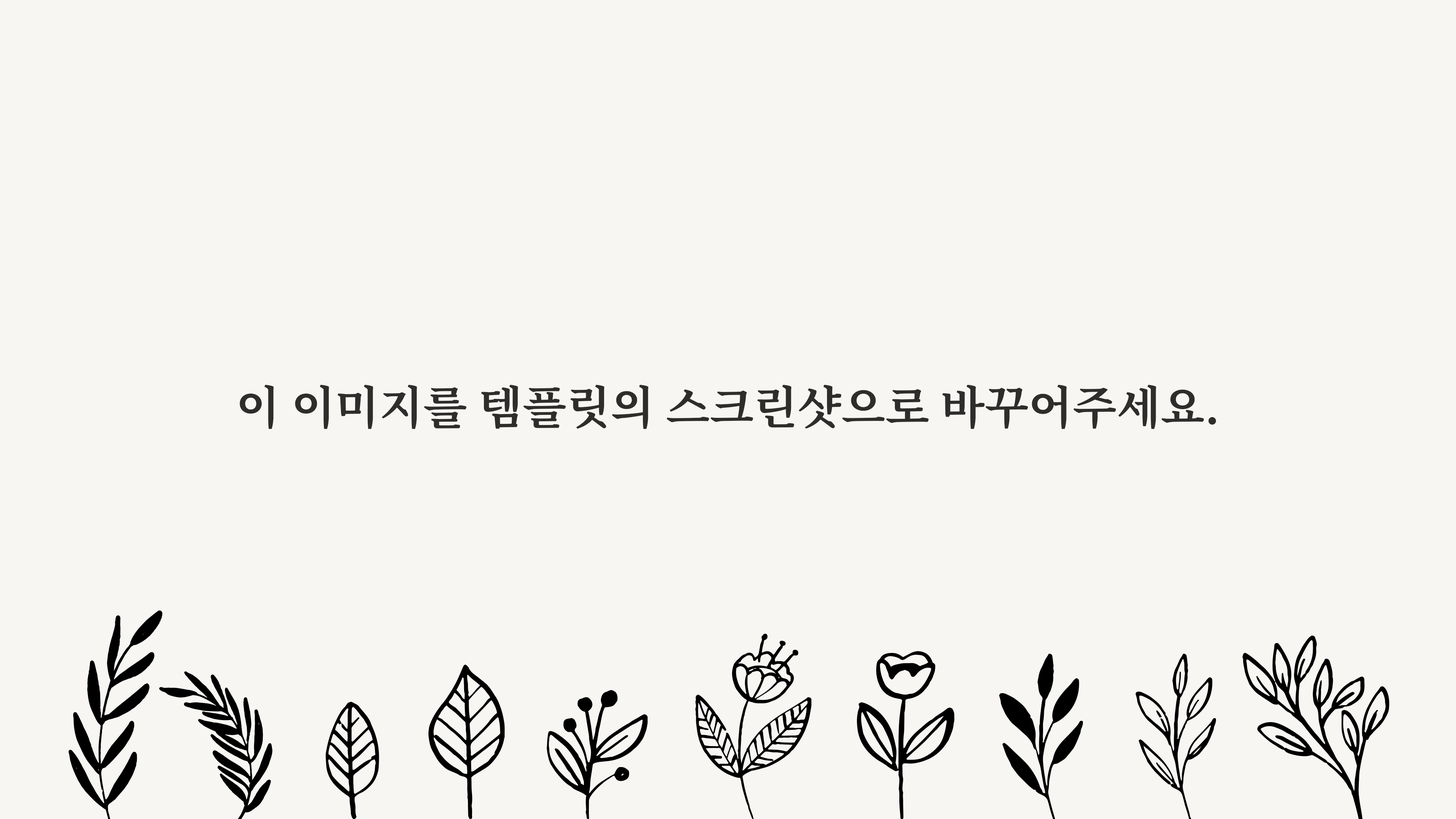
<style>
.page{position:relative;width:1456px;height:819px;background:#f7f6f3}
.page>*{position:absolute;margin:0}
.t1{font:45.5px "NotoSerifKR-Bold";color:#2e2d2c}
</style>
<div class="page">
<p class="t1" style="left:240px;top:385px;width:976px;height:44px">이 이미지를 템플릿의 스크린샷으로 바꾸어주세요.</p>
</div>
